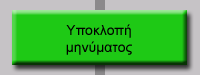
<style>
.page{position:relative;width:200px;height:75px;background:#1ec915}
.page>*{position:absolute;margin:0}
.t1{font:14px "ArialMT";color:#000000}
</style>
<div class="page">
<p class="t1" style="left:66px;top:24px;width:66px;height:31px;text-align:center">Υποκλοπή<br>μηνύματος</p>
</div>
